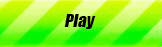
<style>
.page{position:relative;width:162px;height:47px}
.page>*{position:absolute;margin:0}
.t1{font:17px "Impact";color:#000000;font-style:italic}
</style>
<div class="page">
<p class="t1" style="left:64px;top:14px;width:32px;height:15px">Play</p>
</div>
